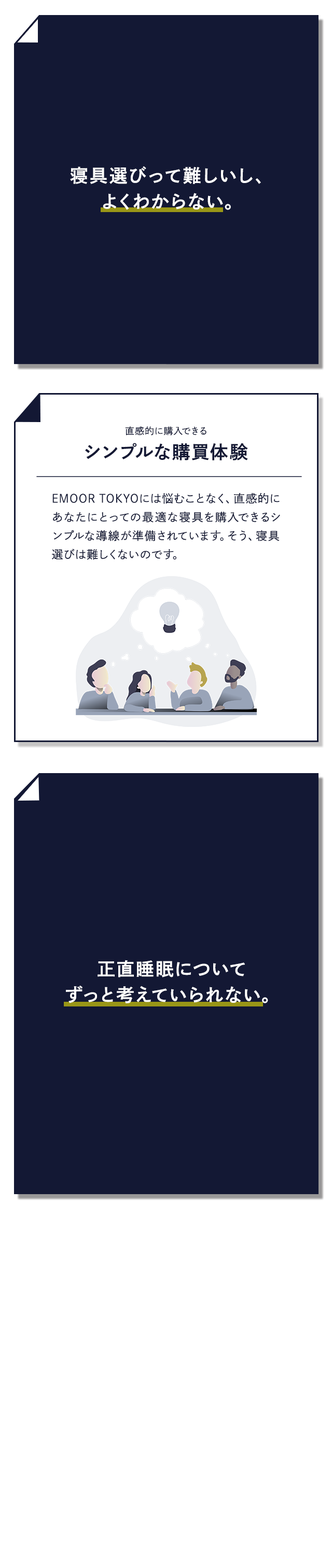
<style>
.page{position:relative;width:332px;height:1568px;background:#ffffff}
.page>*{position:absolute;margin:0}
.t1{font:18.1px/25.9px "DNPShueiGoGinStd-B";letter-spacing:0.075em;color:#ffffff}
.t2{font:9.3px "DNPShueiGoGinStd-L";letter-spacing:0.05em;color:#131834}
.t3{font:18.1px "DNPShueiGoGinStd-B";letter-spacing:0.075em;color:#131834}
.t4{font:11.4px/18.7px "DNPShueiGoGinStd-L";letter-spacing:0.05em;color:#131834}
</style>
<div class="page">
<p class="t1" style="left:70px;top:166px;width:191px;height:44px;text-align:center">寝具選びって難しいし、<br>よくわからない。</p>
<p class="t2" style="left:125px;top:426px;width:81px;height:10px">直感的に購入できる</p>
<p class="t3" style="left:85px;top:443px;width:163px;height:17px">シンプルな購買体験</p>
<p class="t4" style="left:52px;top:493px;width:228px;height:67px;text-align:justify">EMOORTOKYOには悩むことなく、直感的にあなたにとっての最適な寝具を購入できるシンプルな導線が準備されています。そう、寝具選びは難しくないのです。</p>
<p class="t1" style="left:66px;top:960px;width:202px;height:43px;text-align:center">正直睡眠について<br>ずっと考えていられない。</p>
</div>
